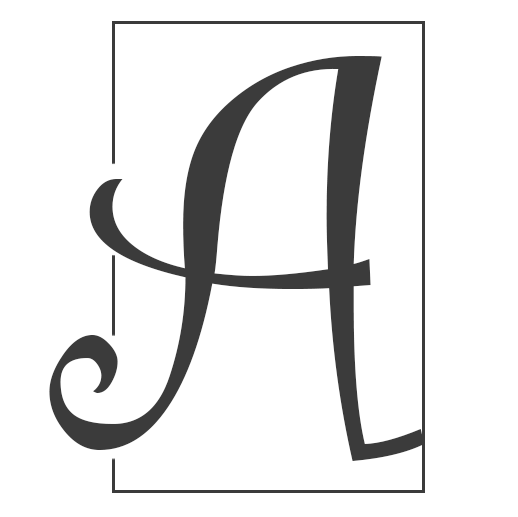
<style>
.page{position:relative;width:518px;height:517px;background:#ffffff}
.page>*{position:absolute;margin:0}
.t1{font:584px "CurlzMT";color:#3b3b3b}
</style>
<div class="page">
<p class="t1" style="left:49px;top:56px;width:376px;height:405px">A</p>
</div>
